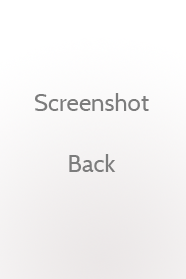
<style>
.page{position:relative;width:186px;height:279px}
.page>*{position:absolute;margin:0}
.t1{font:24.1px "Cabin-Regular";color:#7c7c7c}
</style>
<div class="page">
<p class="t1" style="left:35px;top:93px;width:114px;height:18px">Screenshot</p>
<p class="t1" style="left:69px;top:154px;width:47px;height:18px">Back</p>
</div>
